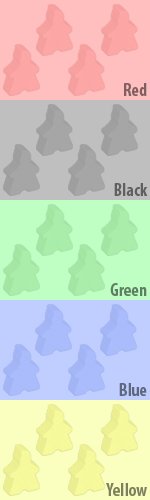
<style>
.page{position:relative;width:150px;height:500px}
.page>*{position:absolute;margin:0}
.t1{font:18px "MyriadPro-BoldCond";color:#7f5f5f}
.t2{font:18px "MyriadPro-BoldCond";color:#5f5f5f}
.t3{font:18px "MyriadPro-BoldCond";color:#5f7f62}
.t4{font:18px "MyriadPro-BoldCond";color:#5f677f}
.t5{font:18px "MyriadPro-BoldCond";color:#7d7f5f}
</style>
<div class="page">
<p class="t1" style="left:124px;top:83px;width:23px;height:13px">Red</p>
<p class="t2" style="left:114px;top:183px;width:34px;height:13px">Black</p>
<p class="t3" style="left:110px;top:283px;width:37px;height:13px">Green</p>
<p class="t4" style="left:119px;top:383px;width:28px;height:13px">Blue</p>
<p class="t5" style="left:106px;top:483px;width:41px;height:13px">Yellow</p>
</div>
